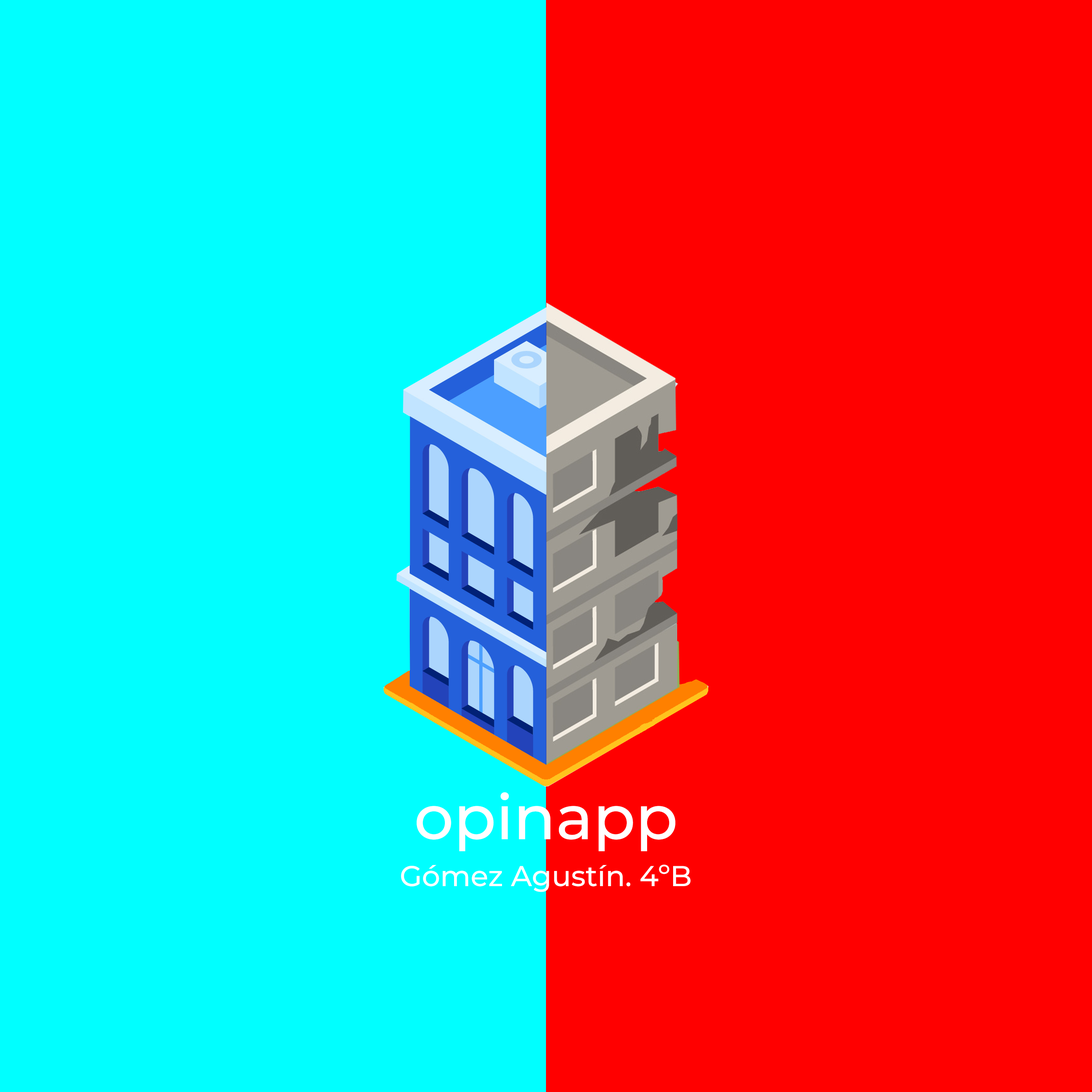
<style>
.page{position:relative;width:1092px;height:1092px;background:#ff0000}
.page>*{position:absolute;margin:0}
.t1{font:61.8px "Montserrat-Medium";color:#ffffff}
.t2{font:28.7px "Montserrat-Medium";color:#ffffff}
</style>
<div class="page">
<p class="t1" style="left:416px;top:792px;width:259px;height:59px">opinapp</p>
<p class="t2" style="left:401px;top:865px;width:290px;height:27px">Gómez Agustín. 4ºB</p>
</div>
